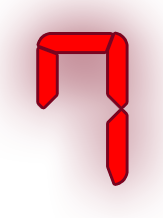
<style>
.page{position:relative;width:163px;height:218px}
.page>*{position:absolute;margin:0}
.t1{font:225.9px "Digital-7";color:#ff0000}
</style>
<div class="page">
<p class="t1" style="left:39px;top:34px;width:87px;height:149px">7</p>
</div>
